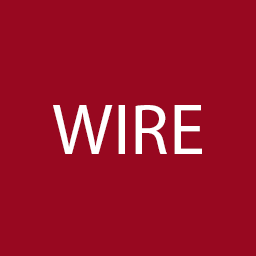
<style>
.page{position:relative;width:256px;height:256px;background:#980820}
.page>*{position:absolute;margin:0}
.t1{font:72px "MyriadPro-Regular";color:#ffffff}
</style>
<div class="page">
<p class="t1" style="left:53px;top:105px;width:149px;height:49px">WIRE</p>
</div>
